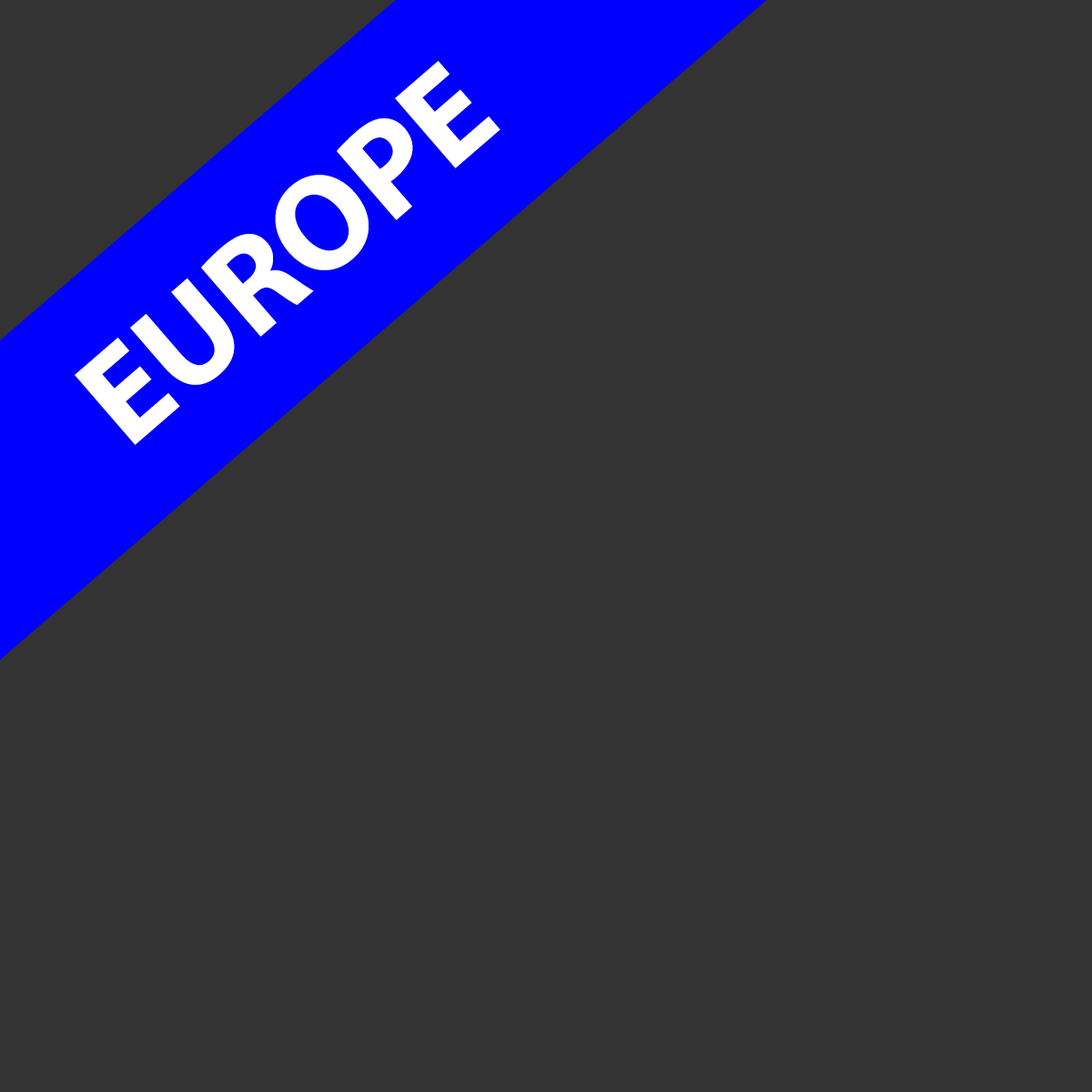
<style>
.page{position:relative;width:1092px;height:1092px;background:#333333}
.page>*{position:absolute;margin:0}
.t1{font:136.5px "MyriadPro-Bold";color:#ffffff}
</style>
<div class="page">
<p class="t1" style="left:75px;top:61px;width:425px;height:384px;rotate:-41deg">EUROPE</p>
</div>
